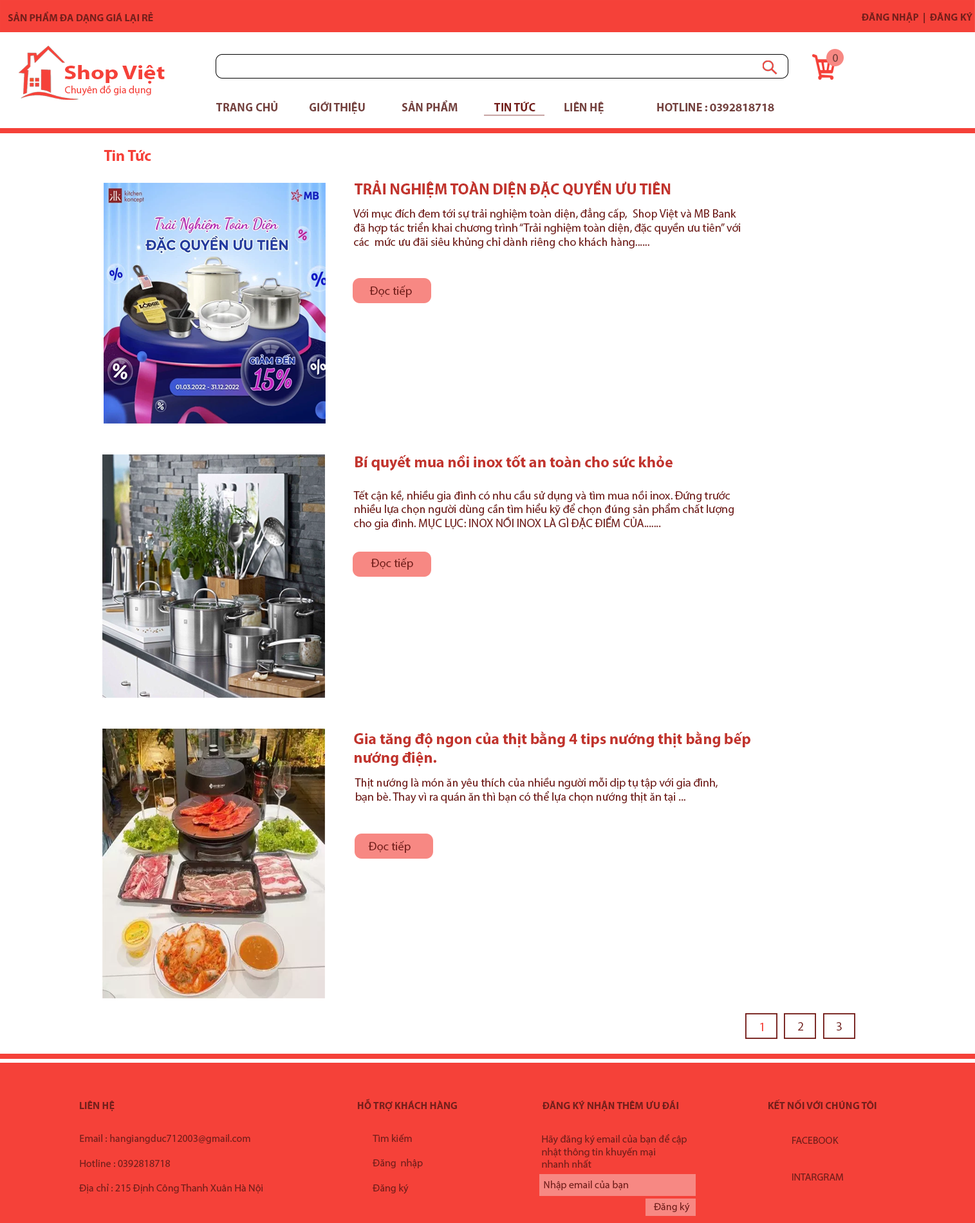
<style>
.page{position:relative;width:975px;height:1223px;background:#ffffff}
.page>*{position:absolute;margin:0}
.t1{font:10.3px "MyriadPro-Bold";color:#751f1b}
.t2{font:20.1px "MyriadPro-Bold";color:#f54139;scale:1.19 1}
.t3{font:11.6px "MyriadPro-Regular";color:#75413e}
.t4{font:10.3px "MyriadPro-Regular";color:#f54139}
.t5{font:10.3px "MyriadPro-Regular";color:#ffffff}
.t6{font:11.6px "MyriadPro-Bold";color:#75413e}
.t7{font:11.6px "MyriadPro-Bold";color:#751f1b}
.t8{font:15.4px "MyriadPro-Bold";color:#f54139}
.t9{font:15.4px "MyriadPro-Bold";color:#c2342d}
.t10{font:11.6px "MyriadPro-Regular";color:#751f1b}
.t11{font:12px "MyriadPro-Regular";color:#751f1b}
.t12{font:12.2px "MyriadPro-Regular";color:#f54139}
.t13{font:12.2px "MyriadPro-Regular";color:#751f1b}
.t14{font:10.3px "MyriadPro-Bold";color:#751f1b;text-transform:uppercase}
.t15{font:10.3px "MyriadPro-Regular";color:#751f1b}
</style>
<div class="page">
<p class="t1" style="left:8px;top:12px;width:145px;height:12px">SẢN PHẨM ĐA DẠNG GIÁ LẠI RẺ</p>
<p class="t1" style="left:862px;top:12px;width:111px;height:11px">ĐĂNG NHẬP  |  ĐĂNG KÝ</p>
<p class="t2" style="left:64px;top:65px;width:101px;height:19px">Shop Việt</p>
<p class="t3" style="left:833px;top:54px;width:5px;height:8px">0</p>
<p class="t4" style="left:61px;top:85px;width:90px;height:11px"><span class="t5">s</span>Chuyên đồ gia dụng</p>
<p class="t6" style="left:216px;top:100px;width:558px;height:14px">TRANG CHỦ   GIỚI THIỆU  SẢN PHẨM   <span class="t7">TIN TỨC</span>  LIÊN HỆ   HOTLINE : 0392818718</p>
<p class="t8" style="left:104px;top:150px;width:47px;height:11px">Tin Tức</p>
<p class="t9" style="left:355px;top:180px;width:316px;height:18px">TRẢI NGHIỆM TOÀN DIỆN ĐẶC QUYỀN ƯU TIÊN</p>
<p class="t10" style="left:353px;top:208px;width:388px;height:40px">Với mục đích đem tới sự trải nghiệm toàn diện, đẳng cấp,  Shop Việt và MB Bank <br>đã hợp tác triển khai chương trình “Trải nghiệm toàn diện, đặc quyền ưu tiên” với <br>các  mức ưu đãi siêu khủng chỉ dành riêng cho khách hàng......</p>
<p class="t11" style="left:369px;top:285px;width:43px;height:12px">Đọc tiếp</p>
<p class="t9" style="left:355px;top:455px;width:318px;height:15px">Bí quyết mua nồi inox tốt an toàn cho sức khỏe</p>
<p class="t10" style="left:353px;top:490px;width:381px;height:40px">Tết cận kề, nhiều gia đình có nhu cầu sử dụng và tìm mua nồi inox. Đứng trước <br>nhiều lựa chọn người dùng cần tìm hiểu kỹ để chọn đúng sản phẩm chất lượng <br>cho gia đình. MỤC LỤC: INOX NỒI INOX LÀ GÌ ĐẶC ĐIỂM CỦA.......</p>
<p class="t11" style="left:371px;top:557px;width:42px;height:13px">Đọc tiếp</p>
<p class="t9" style="left:354px;top:731px;width:396px;height:36px">Gia tăng độ ngon của thịt bằng 4 tips nướng thịt bằng bếp <br>nướng điện.</p>
<p class="t10" style="left:355px;top:778px;width:363px;height:25px">Thịt nướng là món ăn yêu thích của nhiều người mỗi dịp tụ tập với gia đình, <br>bạn bè. Thay vì ra quán ăn thì bạn có thể lựa chọn nướng thịt ăn tại ...</p>
<p class="t11" style="left:368px;top:841px;width:43px;height:12px">Đọc tiếp</p>
<p class="t12" style="left:760px;top:1023px;width:3px;height:8px">1</p>
<p class="t13" style="left:798px;top:1022px;width:5px;height:8px">2</p>
<p class="t13" style="left:837px;top:1022px;width:5px;height:8px">3</p>
<p class="t14" style="left:80px;top:1099px;width:797px;height:13px"><span class="t1">LIÊN HỆ             HỖ TRỢ KHÁCH HÀNG     </span>Đăng ký nhận thêm ưu đãi             Kết nối với chúng tôi</p>
<p class="t15" style="left:373px;top:1133px;width:50px;height:61px">Tìm kiếm<br><br>Đăng  nhập<br><br>Đăng ký</p>
<p class="t15" style="left:79px;top:1134px;width:184px;height:59px">Email : hangiangduc712003@gmail.com<br><br>Hotline : 0392818718<br><br>Địa chỉ : 215 Định Công Thanh Xuân Hà Nội</p>
<p class="t15" style="left:542px;top:1134px;width:145px;height:34px">Hãy đăng ký email của bạn để cập <br>nhật thông tin khuyến mại<br>nhanh nhất</p>
<p class="t15" style="left:792px;top:1137px;width:51px;height:43px">FACEBOOK<br><br><br>INTARGRAM</p>
<p class="t15" style="left:544px;top:1180px;width:84px;height:10px">Nhập email của bạn</p>
<p class="t15" style="left:654px;top:1202px;width:36px;height:11px">Đăng ký</p>
</div>
